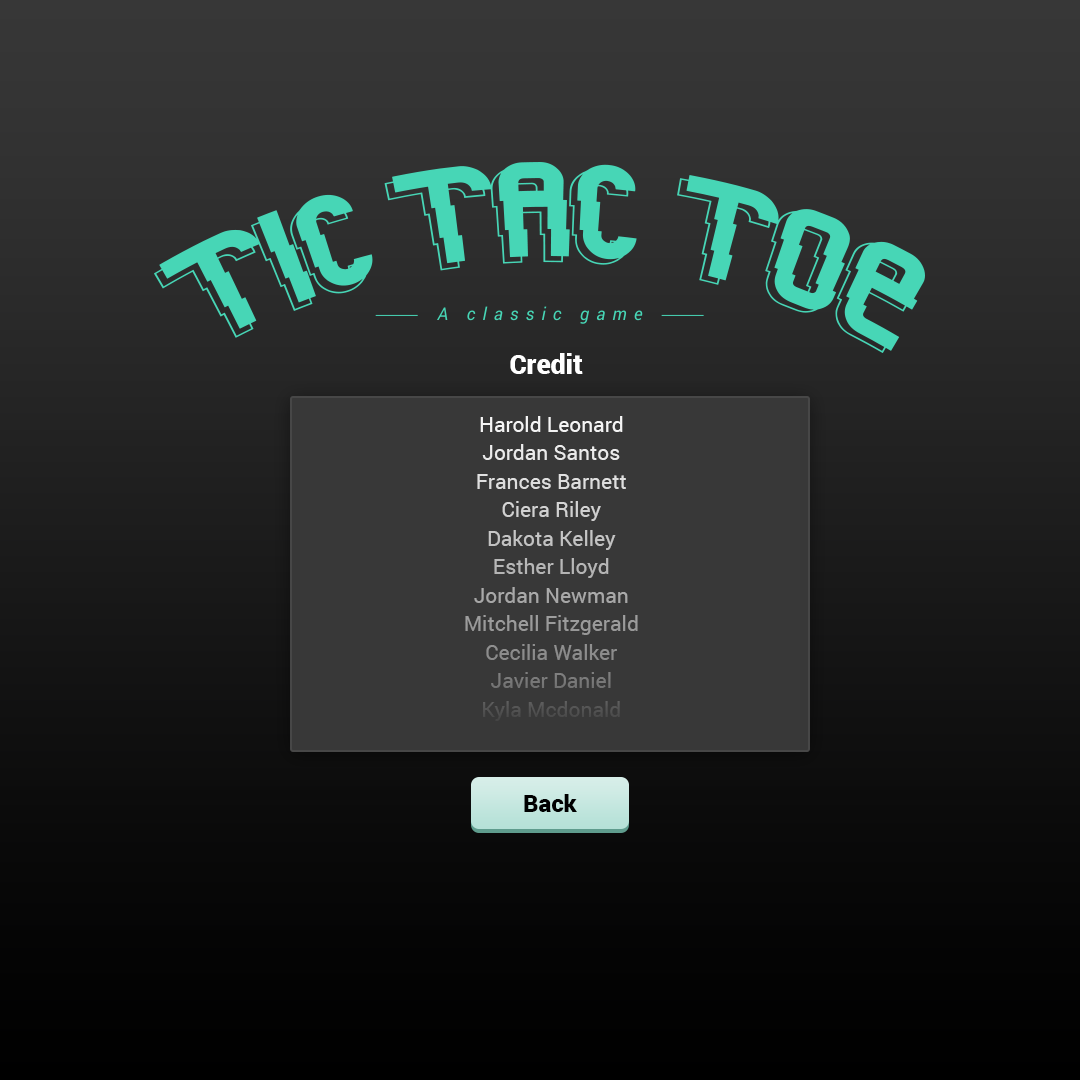
<style>
.page{position:relative;width:1080px;height:1080px}
.page>*{position:absolute;margin:0}
.t1{font:26.8px "Roboto-Black";color:#ffffff}
.t2{font:21px/14.2px "Roboto-Regular"}
.t3{font:24px "Roboto-Black";color:#000000}
</style>
<div class="page">
<p class="t1" style="left:510px;top:353px;width:73px;height:21px">Credit</p>
<p class="t2" style="left:465px;top:416px;width:173px;height:305px;text-align:center">Harold Leonard<br><br>Jordan Santos<br><br>Frances Barnett<br><br>Ciera Riley<br><br>Dakota Kelley<br><br>Esther Lloyd<br><br>Jordan Newman<br><br>Mitchell Fitzgerald<br><br>Cecilia Walker<br><br>Javier Daniel<br><br>Kyla Mcdonald<br><br>Randi Cook<br><br>Armando Barrett<br><br>Graham Love<br><br>Serena Blair<br><br>Tia Jacobs<br><br>Emanuel Klein<br><br>Carina Craig<br><br>Kyra Schwartz<br><br>Alexa Walsh<br><br>Trevor Fleming<br><br>Garrett Barnes<br><br>Dean Baker<br><br>Kristopher Cook<br><br>Carolina Salazar<br><br>Cassidy Sullivan<br><br>Josue Weber<br><br>Chelsea May<br><br>Alan Logan<br><br>Anthony West</p>
<p class="t3" style="left:524px;top:794px;width:53px;height:18px">Back</p>
</div>
